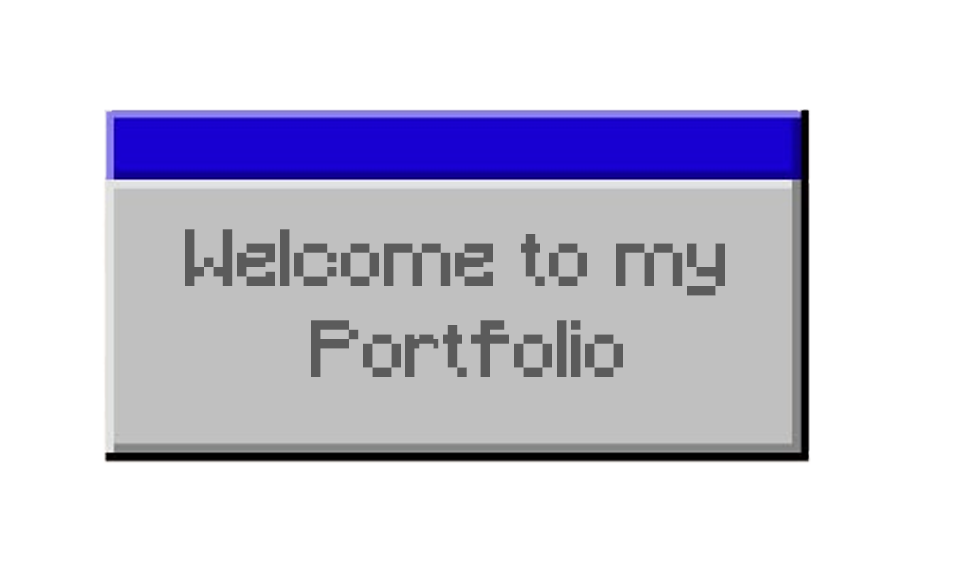
<style>
.page{position:relative;width:960px;height:572px;background:#ffffff}
.page>*{position:absolute;margin:0}
.t1{font:75.7px "Minecraft";color:#5b5b5b}
</style>
<div class="page">
<p class="t1" style="left:185px;top:229px;width:540px;height:148px;text-align:center">Welcome to my <br>Portfolio</p>
</div>
